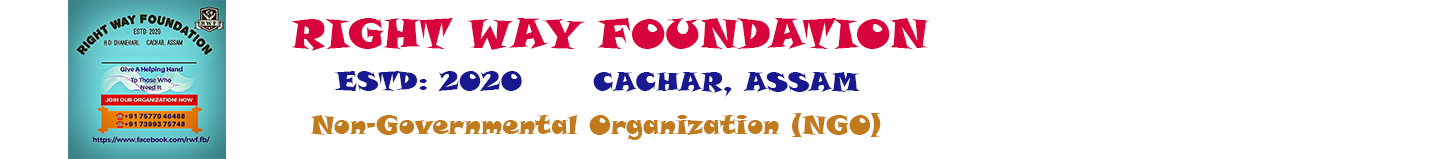
<style>
.page{position:relative;width:1443px;height:159px;background:#ffffff}
.page>*{position:absolute;margin:0}
.t1{font:41px "SnapITC-Regular";color:#d8053c}
.t2{font:26px "SnapITC-Regular";color:#19198f}
.t3{font:26px "SnapITC-Regular";color:#c07c1c}
</style>
<div class="page">
<p class="t1" style="left:291px;top:18px;width:639px;height:33px">RIGHT WAY FOUNDATION</p>
<p class="t2" style="left:334px;top:71px;width:188px;height:20px">ESTD: 2020</p>
<p class="t2" style="left:593px;top:72px;width:268px;height:25px">CACHAR, ASSAM</p>
<p class="t3" style="left:310px;top:113px;width:571px;height:27px">Non-Governmental Organization (NGO)</p>
</div>
